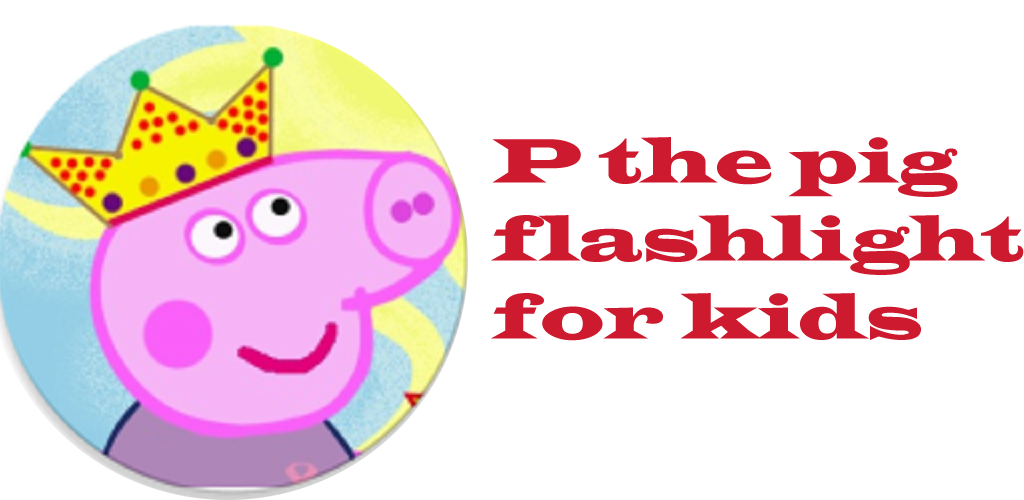
<style>
.page{position:relative;width:1024px;height:500px;background:#ffffff}
.page>*{position:absolute;margin:0}
.t1{font:65px "LatinWide";color:#cd1a2f}
</style>
<div class="page">
<p class="t1" style="left:491px;top:137px;width:533px;height:204px">P the pig flashlight for kids</p>
</div>
